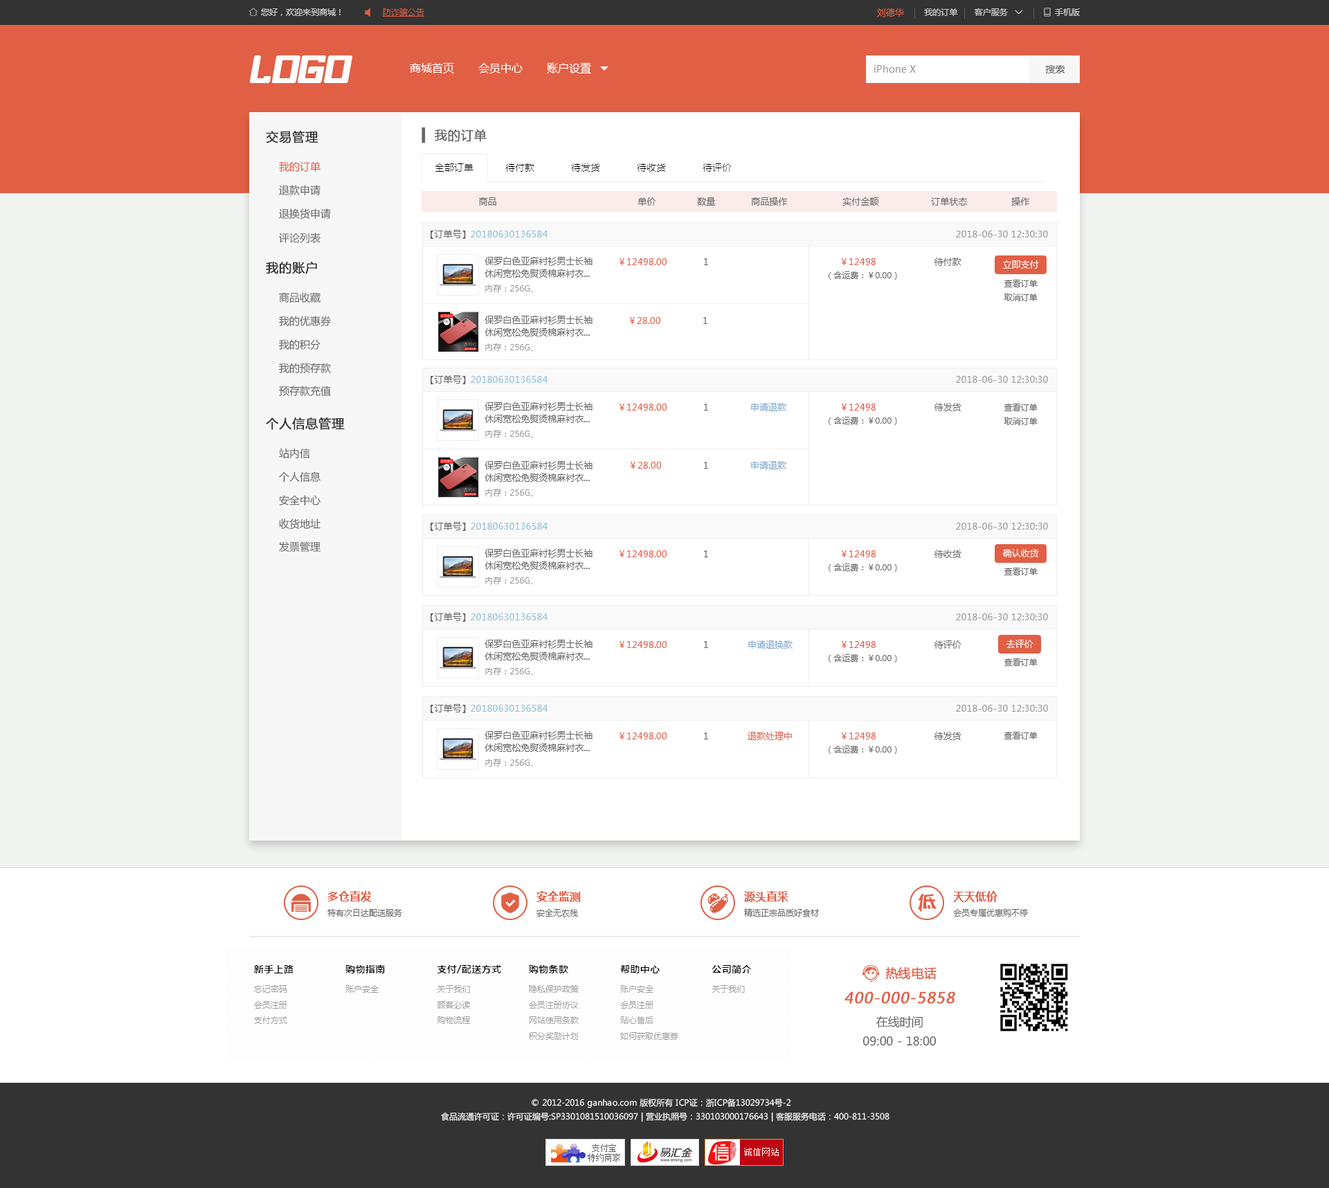
<style>
.page{position:relative;width:1329px;height:1188px;background:#ffffff}
.page>*{position:absolute;margin:0}
.t1{font:9px "MicrosoftYaHei";color:#e15f45}
.t2{font:11.1px "MicrosoftYaHei";color:#ffffff}
.t3{font:9.7px "MicrosoftYaHei";color:#999999}
.t4{font:9.7px "MicrosoftYaHei";color:#666666}
.t5{font:12.5px "MicrosoftYaHei";color:#333333;font-weight:bold}
.t6{font:12.5px "MicrosoftYaHei";color:#666666;font-weight:bold}
.t7{font:10.4px "MicrosoftYaHei";color:#e15f45}
.t8{font:10.4px "MicrosoftYaHei";color:#666666}
.t9{font:9px "MicrosoftYaHei";color:#666666}
.t10{font:9px "MicrosoftYaHei";color:#8fc0d5}
.t11{font:9px "MicrosoftYaHei";color:#999999}
.t12{font:9px/12.5px "MicrosoftYaHei";color:#666666}
.t13{font:9px "MicrosoftYaHei";color:#fffefe}
.t14{font:8.3px "MicrosoftYaHei";color:#666666}
.t15{font:8.3px "MicrosoftYaHei";color:#999999}
.t16{font:9px "MicrosoftYaHei";color:#7fa8cb}
.t17{font:11.1px "MicrosoftYaHei-Bold";color:#e15f45}
.t18{font:12.5px "MicrosoftYaHei";color:#e15f45;font-weight:bold}
.t19{font:14.9px "MicrosoftYaHei";color:#e15f45;font-weight:bold;font-style:italic}
.t20{font:11.8px/19.3px "MicrosoftYaHei";color:#666666}
.t21{font:8.3px/13.8px "MicrosoftYaHei";color:#eeeeee}
</style>
<div class="page">
<p class="t1" style="left:877px;top:8px;width:27px;height:9px">刘德华</p>
<p class="t2" style="left:410px;top:62px;width:181px;height:11px">商城首页       会员中心       账户设置</p>
<p class="t3" style="left:874px;top:65px;width:42px;height:8px">iPhone X</p>
<p class="t4" style="left:1045px;top:65px;width:20px;height:8px">搜索</p>
<p class="t5" style="left:266px;top:131px;width:52px;height:12px">交易管理</p>
<p class="t6" style="left:422px;top:127px;width:65px;height:16px">▍ 我的订单</p>
<p class="t7" style="left:279px;top:161px;width:42px;height:11px">我的订单</p>
<p class="t8" style="left:279px;top:185px;width:42px;height:11px">退款申请</p>
<p class="t9" style="left:479px;top:197px;width:551px;height:9px">商品                                                   单价               数量             商品操作                    实付金额                   订单状态                操作</p>
<p class="t8" style="left:279px;top:208px;width:52px;height:11px">退换货申请</p>
<p class="t8" style="left:279px;top:233px;width:42px;height:10px">评论列表</p>
<p class="t10" style="left:431px;top:230px;width:117px;height:9px"><span class="t9">【订单号】</span>20180630136584</p>
<p class="t11" style="left:956px;top:231px;width:92px;height:6px">2018-06-30 12:30:30</p>
<p class="t12" style="left:485px;top:257px;width:108px;height:21px">保罗白色亚麻衬衫男士长袖<br>休闲宽松免熨烫棉麻衬衣...</p>
<p class="t1" style="left:842px;top:258px;width:120px;height:8px">￥12498<span class="t9">                     待付款</span></p>
<p class="t5" style="left:266px;top:262px;width:51px;height:12px">我的账户</p>
<p class="t1" style="left:620px;top:258px;width:88px;height:7px">￥12498.00<span class="t9">             1</span></p>
<p class="t13" style="left:1003px;top:260px;width:36px;height:9px">立即支付</p>
<p class="t14" style="left:829px;top:271px;width:68px;height:9px">（含运费：￥0.00）</p>
<p class="t14" style="left:1005px;top:280px;width:33px;height:7px">查看订单</p>
<p class="t8" style="left:279px;top:292px;width:42px;height:11px">商品收藏</p>
<p class="t15" style="left:485px;top:285px;width:48px;height:7px">内存：256G、</p>
<p class="t14" style="left:1004px;top:294px;width:34px;height:7px">取消订单</p>
<p class="t8" style="left:279px;top:316px;width:52px;height:10px">我的优惠券</p>
<p class="t12" style="left:485px;top:316px;width:108px;height:20px">保罗白色亚麻衬衫男士长袖<br>休闲宽松免熨烫棉麻衬衣...</p>
<p class="t1" style="left:630px;top:317px;width:78px;height:7px">￥28.00<span class="t9">               1</span></p>
<p class="t8" style="left:279px;top:339px;width:42px;height:11px">我的积分</p>
<p class="t15" style="left:485px;top:343px;width:48px;height:8px">内存：256G、</p>
<p class="t8" style="left:279px;top:363px;width:52px;height:10px">我的预存款</p>
<p class="t10" style="left:431px;top:375px;width:117px;height:9px"><span class="t9">【订单号】</span>20180630136584</p>
<p class="t11" style="left:956px;top:376px;width:92px;height:7px">2018-06-30 12:30:30</p>
<p class="t8" style="left:279px;top:386px;width:52px;height:11px">预存款充值</p>
<p class="t12" style="left:485px;top:402px;width:108px;height:21px">保罗白色亚麻衬衫男士长袖<br>休闲宽松免熨烫棉麻衬衣...</p>
<p class="t1" style="left:620px;top:403px;width:166px;height:8px">￥12498.00<span class="t9">             1               </span><span class="t16">申请退款</span></p>
<p class="t1" style="left:842px;top:403px;width:120px;height:8px">￥12498<span class="t9">                     待发货</span></p>
<p class="t14" style="left:1005px;top:404px;width:33px;height:7px">查看订单</p>
<p class="t5" style="left:266px;top:417px;width:79px;height:13px">个人信息管理</p>
<p class="t14" style="left:829px;top:417px;width:68px;height:8px">（含运费：￥0.00）</p>
<p class="t14" style="left:1004px;top:417px;width:34px;height:8px">取消订单</p>
<p class="t15" style="left:485px;top:430px;width:48px;height:8px">内存：256G、</p>
<p class="t8" style="left:279px;top:448px;width:31px;height:11px">站内信</p>
<p class="t12" style="left:485px;top:461px;width:108px;height:21px">保罗白色亚麻衬衫男士长袖<br>休闲宽松免熨烫棉麻衬衣...</p>
<p class="t1" style="left:631px;top:461px;width:155px;height:8px">￥28.00<span class="t9">               1               </span><span class="t16">申请退款</span></p>
<p class="t8" style="left:279px;top:471px;width:42px;height:12px">个人信息</p>
<p class="t8" style="left:279px;top:495px;width:42px;height:11px">安全中心</p>
<p class="t15" style="left:485px;top:489px;width:48px;height:7px">内存：256G、</p>
<p class="t8" style="left:279px;top:519px;width:42px;height:11px">收货地址</p>
<p class="t10" style="left:431px;top:522px;width:117px;height:9px"><span class="t9">【订单号】</span>20180630136584</p>
<p class="t11" style="left:956px;top:523px;width:92px;height:7px">2018-06-30 12:30:30</p>
<p class="t8" style="left:279px;top:541px;width:42px;height:11px">发票管理</p>
<p class="t12" style="left:485px;top:549px;width:108px;height:21px">保罗白色亚麻衬衫男士长袖<br>休闲宽松免熨烫棉麻衬衣...</p>
<p class="t1" style="left:620px;top:550px;width:88px;height:7px">￥12498.00<span class="t9">             1</span></p>
<p class="t1" style="left:842px;top:550px;width:120px;height:8px">￥12498<span class="t9">                     待收货</span></p>
<p class="t13" style="left:1002px;top:549px;width:37px;height:8px">确认收货</p>
<p class="t14" style="left:829px;top:564px;width:68px;height:8px">（含运费：￥0.00）</p>
<p class="t14" style="left:1005px;top:568px;width:33px;height:7px">查看订单</p>
<p class="t15" style="left:485px;top:577px;width:48px;height:7px">内存：256G、</p>
<p class="t10" style="left:431px;top:613px;width:117px;height:9px"><span class="t9">【订单号】</span>20180630136584</p>
<p class="t11" style="left:956px;top:613px;width:92px;height:7px">2018-06-30 12:30:30</p>
<p class="t12" style="left:485px;top:640px;width:108px;height:20px">保罗白色亚麻衬衫男士长袖<br>休闲宽松免熨烫棉麻衬衣...</p>
<p class="t1" style="left:620px;top:640px;width:173px;height:9px">￥12498.00<span class="t9">             1              </span><span class="t16">申请退换款</span></p>
<p class="t1" style="left:842px;top:640px;width:120px;height:9px">￥12498<span class="t9">                     待评价</span></p>
<p class="t13" style="left:1007px;top:640px;width:27px;height:8px">去评价</p>
<p class="t14" style="left:829px;top:654px;width:68px;height:9px">（含运费：￥0.00）</p>
<p class="t14" style="left:1005px;top:658px;width:33px;height:8px">查看订单</p>
<p class="t15" style="left:485px;top:667px;width:48px;height:8px">内存：256G、</p>
<p class="t10" style="left:431px;top:704px;width:117px;height:9px"><span class="t9">【订单号】</span>20180630136584</p>
<p class="t11" style="left:956px;top:705px;width:92px;height:7px">2018-06-30 12:30:30</p>
<p class="t12" style="left:485px;top:731px;width:108px;height:21px">保罗白色亚麻衬衫男士长袖<br>休闲宽松免熨烫棉麻衬衣...</p>
<p class="t1" style="left:620px;top:732px;width:172px;height:8px">￥12498.00<span class="t9">             1              </span>退款处理中</p>
<p class="t1" style="left:842px;top:732px;width:120px;height:8px">￥12498<span class="t9">                     待发货</span></p>
<p class="t14" style="left:1005px;top:732px;width:33px;height:7px">查看订单</p>
<p class="t14" style="left:829px;top:746px;width:68px;height:8px">（含运费：￥0.00）</p>
<p class="t15" style="left:485px;top:759px;width:48px;height:7px">内存：256G、</p>
<p class="t17" style="left:327px;top:891px;width:45px;height:11px">多仓直发</p>
<p class="t17" style="left:537px;top:891px;width:44px;height:11px">安全监测</p>
<p class="t17" style="left:744px;top:891px;width:45px;height:11px">源头直采</p>
<p class="t17" style="left:953px;top:891px;width:45px;height:11px">天天低价</p>
<p class="t14" style="left:327px;top:909px;width:75px;height:8px">特有次日达配送服务</p>
<p class="t14" style="left:537px;top:909px;width:41px;height:8px">安全无农残</p>
<p class="t14" style="left:744px;top:908px;width:75px;height:9px">精选正宗品质好食材</p>
<p class="t14" style="left:953px;top:909px;width:75px;height:8px">会员专属优惠购不停</p>
<p class="t18" style="left:885px;top:967px;width:52px;height:13px">热线电话</p>
<p class="t19" style="left:845px;top:991px;width:110px;height:13px">400-000-5858</p>
<p class="t20" style="left:863px;top:1016px;width:74px;height:30px;text-align:center">在线时间<br>09:00 - 18:00</p>
<p class="t21" style="left:441px;top:1098px;width:449px;height:24px;text-align:center">© 2012-2016 ganhao.com 版权所有 ICP证：浙ICP备13029734号-2   <br>食品流通许可证：许可证编号:SP3301081510036097 | 营业执照号：330103000176643 | 客服服务电话：400-811-3508</p>
</div>
